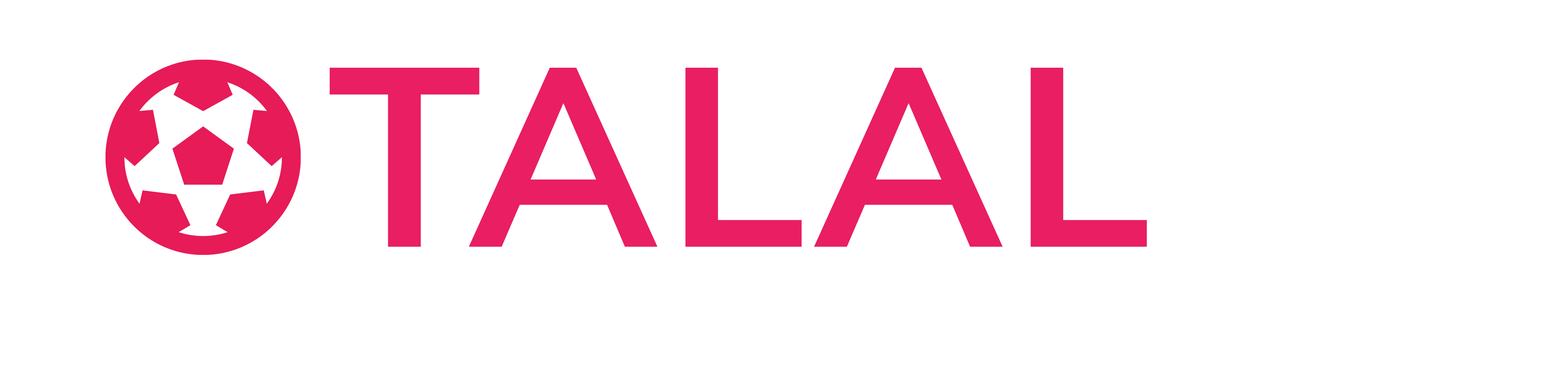
<style>
.page{position:relative;width:1568px;height:368px;background:#ffffff}
.page>*{position:absolute;margin:0}
.t1{font:251.2px "Muli-Bold";letter-spacing:0.035em;color:#e61b57;text-transform:uppercase}
</style>
<div class="page">
<p class="t1" style="left:330px;top:68px;width:817px;height:179px">Talal</p>
</div>
